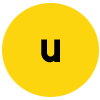
<style>
.page{position:relative;width:100px;height:100px;background:#fdd50e}
.page>*{position:absolute;margin:0}
.t1{font:50px "FundamentalBrigadeSchwer";color:#000000}
</style>
<div class="page">
<p class="t1" style="left:41px;top:39px;width:19px;height:24px">u</p>
</div>
